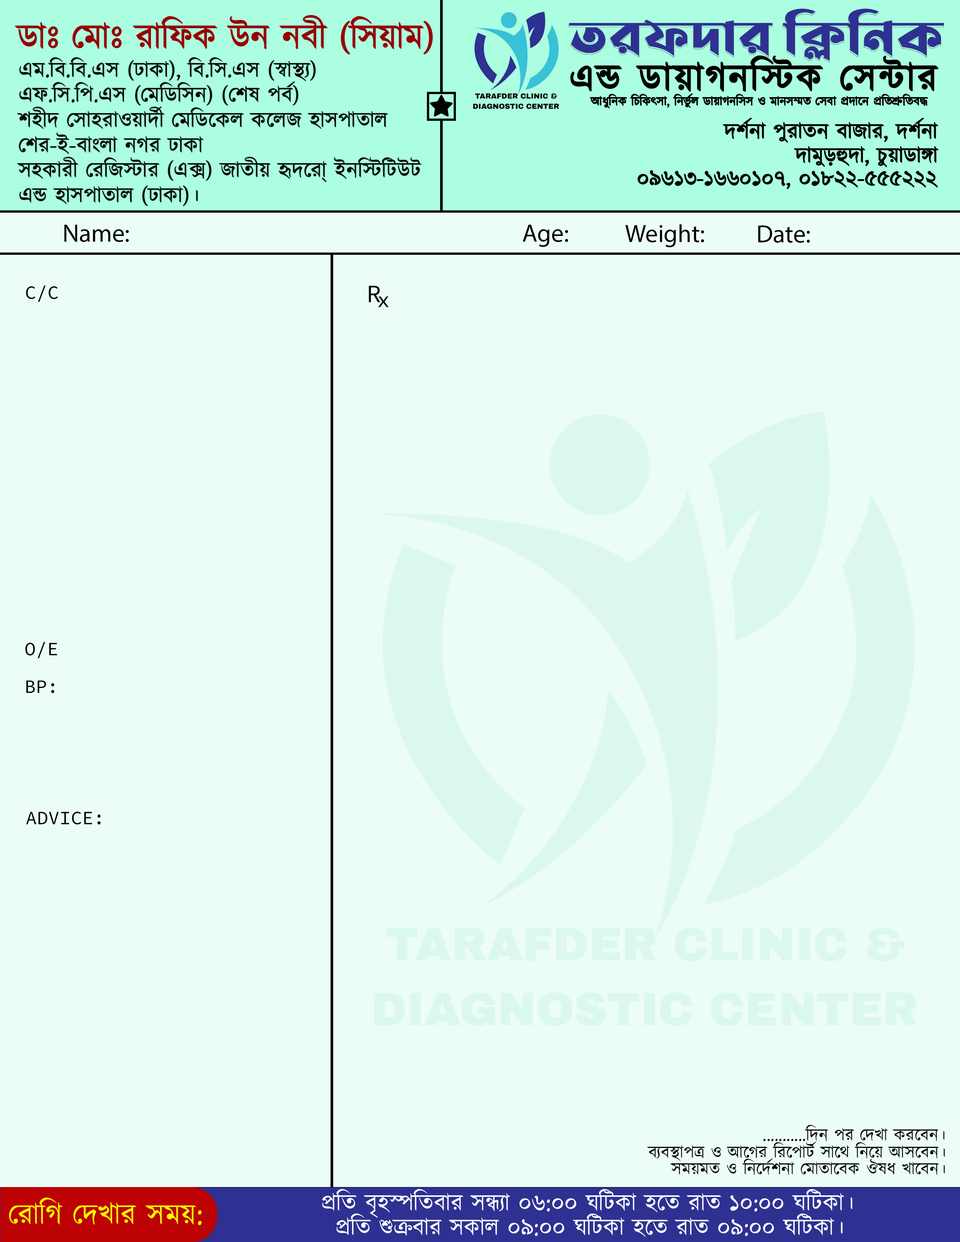
<style>
.page{position:relative;width:960px;height:1242px;background:#ecfdf7}
.page>*{position:absolute;margin:0}
.t1{font:35.4px "Kalpurush";color:#9a0000}
.t2{font:51px "LiSirajeeSheikhPlainUnicode";color:#2e3192}
.t3{font:22px/25.1px "Kalpurush";color:#000000}
.t4{font:37.6px "Kalpurush";letter-spacing:0.06em;color:#000000}
.t5{font:12.5px "Kalpurush";color:#000000}
.t6{font:22px "Kalpurush";color:#000000}
.t7{font:25.1px "MyriadPro-Regular";color:#000000}
.t8{font:18.8px "SourceCodePro-Regular";color:#000000}
.t9{font:25.1px "SourceCodePro-Regular";color:#000000}
.t10{font:22px "SourceCodePro-Regular";color:#000000}
.t11{font:17.3px "Kalpurush";color:#000000}
.t12{font:23.6px "Kalpurush";color:#ffffff}
.t13{font:29.9px "Kalpurush";color:#fcff00}
</style>
<div class="page">
<p class="t1" style="left:15px;top:15px;width:418px;height:39px">ডাঃ মোঃ রাফিক উন নবী (সিয়াম)</p>
<p class="t2" style="left:569px;top:9px;width:375px;height:52px">তরফদার ক্লিনিক</p>
<p class="t3" style="left:17px;top:57px;width:405px;height:149px">এম.বি.বি.এস (ঢাকা), বি.সি.এস (স্বাস্থ্য)<br>এফ.সি.পি.এস (মেডিসিন) (শেষ পর্ব)<br>শহীদ সোহরাওয়ার্দী মেডিকেল কলেজ হাসপাতাল<br>শের-ই-বাংলা নগর ঢাকা<br>সহকারী রেজিস্টার (এক্স) জাতীয় হৃদরো্ ইনস্টিটিউট<br>এন্ড হাসপাতাল (ঢাকা)।</p>
<p class="t4" style="left:571px;top:56px;width:367px;height:35px">এন্ড ডায়াগনস্টিক সেন্টার</p>
<p class="t5" style="left:590px;top:94px;width:338px;height:14px">আধুনিক চিকিৎসা, নির্ভুল ডায়াগনসিস ও মানসম্মত সেবা প্রদানে প্রতিশ্রুতিবদ্ধ</p>
<p class="t6" style="left:723px;top:118px;width:215px;height:25px">দর্শনা পুরাতন বাজার, দর্শনা</p>
<p class="t6" style="left:794px;top:146px;width:144px;height:21px">দামুড়হুদা, চুয়াডাঙ্গা</p>
<p class="t6" style="left:638px;top:171px;width:299px;height:18px">০৯৬১৩-১৬৬০১০৭, ০১৮২২-৫৫৫২২২</p>
<p class="t7" style="left:64px;top:225px;width:65px;height:17px">Name:</p>
<p class="t7" style="left:522px;top:225px;width:46px;height:22px">Age:</p>
<p class="t7" style="left:625px;top:224px;width:79px;height:23px">Weight:</p>
<p class="t7" style="left:758px;top:225px;width:52px;height:18px">Date:</p>
<p class="t8" style="left:26px;top:285px;width:32px;height:17px">C/C</p>
<p class="t9" style="left:369px;top:286px;width:11px;height:16px">R</p>
<p class="t10" style="left:378px;top:296px;width:11px;height:12px">x</p>
<p class="t8" style="left:25px;top:642px;width:32px;height:16px">O/E</p>
<p class="t8" style="left:26px;top:681px;width:28px;height:12px">BP:</p>
<p class="t8" style="left:26px;top:812px;width:75px;height:13px">ADVICE:</p>
<p class="t11" style="left:763px;top:1125px;width:181px;height:16px">...........দিন পর দেখা করবেন।</p>
<p class="t11" style="left:647px;top:1142px;width:298px;height:19px">ব্যবস্থাপত্র ও আগের রিপোর্ট সাথে নিয়ে আসবেন।</p>
<p class="t11" style="left:670px;top:1159px;width:275px;height:16px">সময়মত ও নির্দেশনা মোতাবেক ঔষধ খাবেন।</p>
<p class="t12" style="left:322px;top:1189px;width:530px;height:29px">প্রতি বৃহস্পতিবার সন্ধ্যা ০৬:০০ ঘটিকা হতে রাত ১০:০০ ঘটিকা।</p>
<p class="t13" style="left:9px;top:1198px;width:193px;height:27px">রোগি দেখার সময়:</p>
<p class="t12" style="left:337px;top:1214px;width:505px;height:23px">প্রতি শুক্রবার সকাল ০৯:০০ ঘটিকা হতে রাত ০৯:০০ ঘটিকা।</p>
</div>
